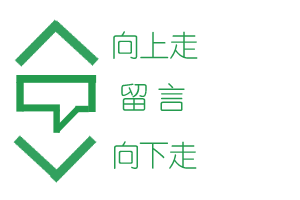
<style>
.page{position:relative;width:300px;height:200px;background:#ffffff}
.page>*{position:absolute;margin:0}
.t1{font:30px "YouYuan";letter-spacing:0.01em;color:#249b4e}
.t2{font:30px "YouYuan";letter-spacing:-0.1em;color:#249b4e}
.t3{font:30px "YouYuan";letter-spacing:-0.01em;color:#249b4e}
</style>
<div class="page">
<p class="t1" style="left:113px;top:31px;width:85px;height:28px">向上走</p>
<p class="t2" style="left:121px;top:83px;width:64px;height:28px">留 言</p>
<p class="t3" style="left:114px;top:141px;width:83px;height:28px">向下走</p>
</div>
